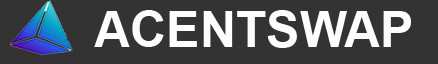
<style>
.page{position:relative;width:438px;height:64px;background:#333333}
.page>*{position:absolute;margin:0}
.t1{font:50px "Arial-BoldMT";color:#fdfdfd}
</style>
<div class="page">
<p class="t1" style="left:94px;top:10px;width:317px;height:38px">ACENTSWAP</p>
</div>
